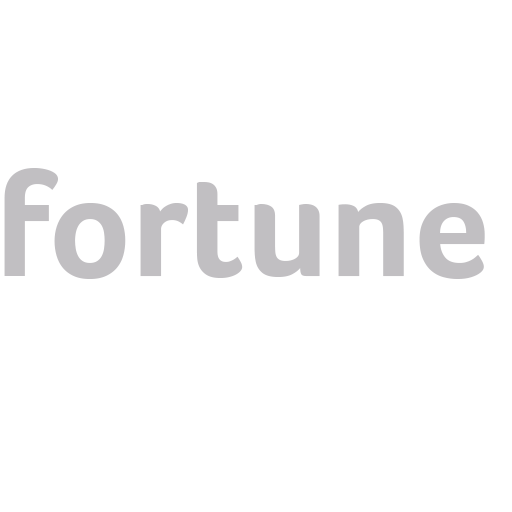
<style>
.page{position:relative;width:512px;height:512px;background:#ffffff}
.page>*{position:absolute;margin:0}
.t1{font:150px "Foco-Bold";color:#c1bfc2}
</style>
<div class="page">
<p class="t1" style="left:4px;top:168px;width:481px;height:111px">fortune</p>
</div>
